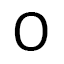
<style>
.page{position:relative;width:64px;height:64px;background:#ffffff}
.page>*{position:absolute;margin:0}
.t1{font:58.3px "Calibri";color:#000000}
</style>
<div class="page">
<p class="t1" style="left:14px;top:12px;width:34px;height:39px">О</p>
</div>
